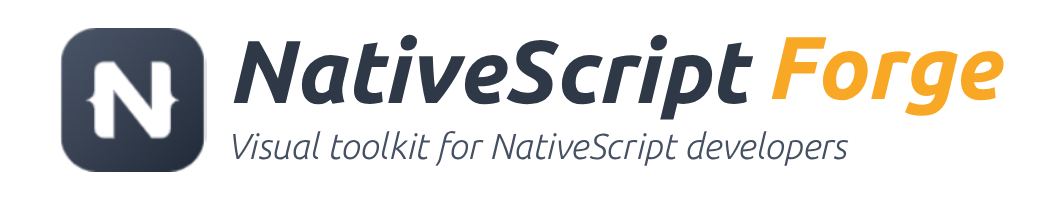
<style>
.page{position:relative;width:1064px;height:200px;background:#ffffff}
.page>*{position:absolute;margin:0}
.t1{font:89px "Ubuntu-BoldItalic";color:#2e3847}
.t2{font:89px "Ubuntu-BoldItalic";color:#f9a825}
.t3{font:36px "Ubuntu-LightItalic";color:#455062}
</style>
<div class="page">
<p class="t1" style="left:233px;top:34px;width:521px;height:86px">NativeScript</p>
<p class="t2" style="left:771px;top:37px;width:233px;height:79px">Forge</p>
<p class="t3" style="left:233px;top:131px;width:616px;height:35px">Visual toolkit for NativeScript developers</p>
</div>
